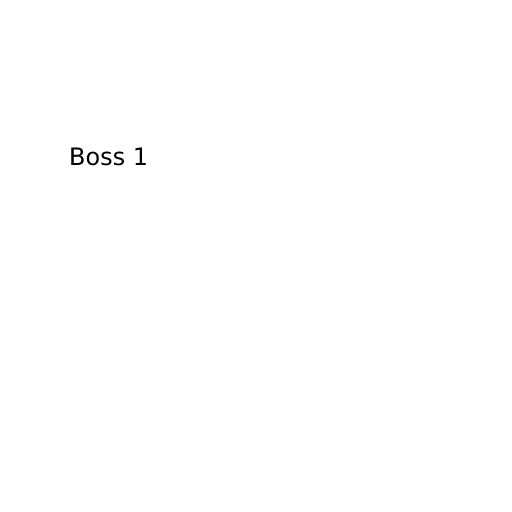
<style>
.page{position:relative;width:512px;height:512px;background:#ffffff}
.page>*{position:absolute;margin:0}
.t1{font:24px "DejaVuSans";color:#000000}
</style>
<div class="page">
<p class="t1" style="left:71px;top:147px;width:75px;height:19px">Boss 1</p>
</div>
